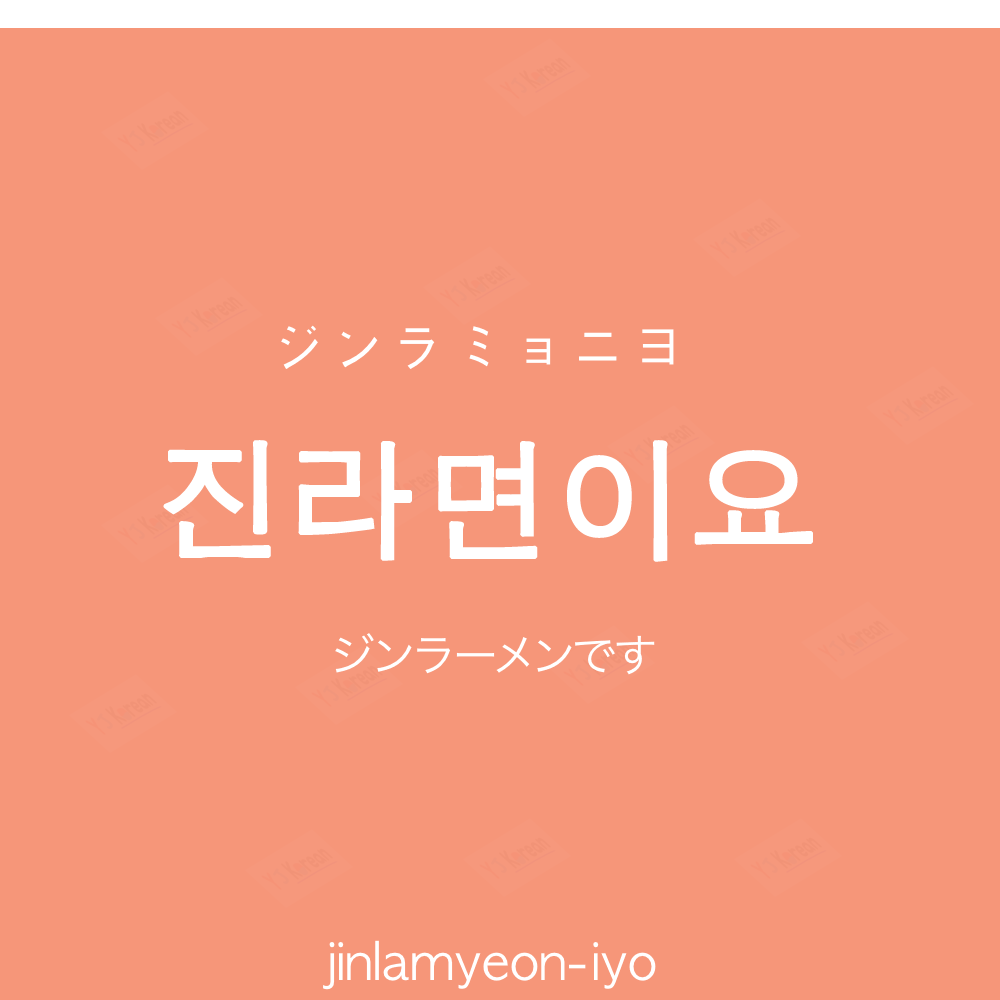
<style>
.page{position:relative;width:1000px;height:1000px;background:#f69679}
.page>*{position:absolute;margin:0}
.t1{font:60px "AppleGothic";color:#ffffff}
.t2{font:130px "AppleGothic";color:#ffffff;font-weight:bold}
.t3{font:45px "HiraKakuProN-W3";color:#ffffff}
.t4{font:50px "AppleGothic";color:#ffffff}
</style>
<div class="page">
<p class="t1" style="left:281px;top:325px;width:393px;height:44px">ジンラミョニヨ</p>
<p class="t2" style="left:163px;top:440px;width:650px;height:122px">진라면이요</p>
<p class="t3" style="left:335px;top:633px;width:320px;height:42px">ジンラーメンです</p>
<p class="t4" style="left:323px;top:940px;width:333px;height:50px">jinlamyeon-iyo</p>
</div>
